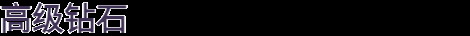
<style>
.page{position:relative;width:470px;height:36px;background:#000000}
.page>*{position:absolute;margin:0}
.t1{font:32px "WebPSD-18463539-0-Regular";color:#3f3254;font-weight:bold}
</style>
<div class="page">
<p class="t1" style="left:0px;top:0px;width:470px;height:36px">高级钻石</p>
</div>
